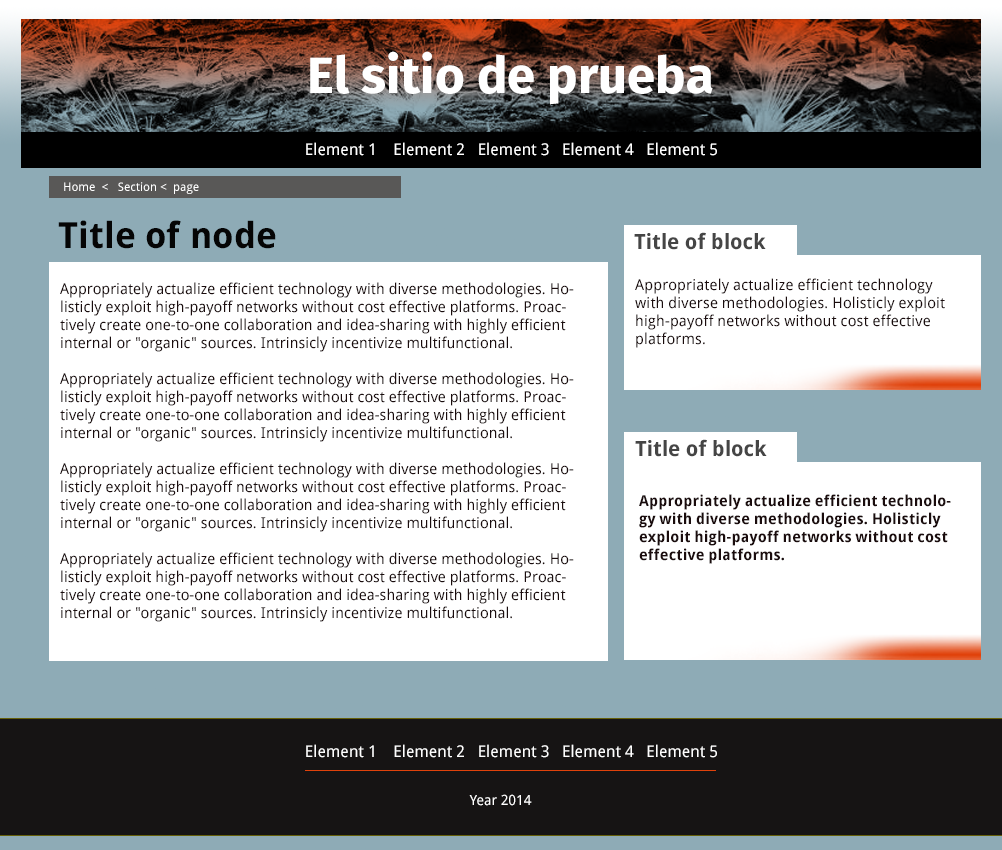
<style>
.page{position:relative;width:1002px;height:850px;background:#ffffff}
.page>*{position:absolute;margin:0}
.t1{font:51px "FiraSansOT-Bold";color:#ffffff}
.t2{font:16px "DroidSans";color:#ffffff}
.t3{font:12px "DroidSans";color:#ffffff}
.t4{font:36px "DroidSans-Bold";color:#050505}
.t5{font:21px "DroidSans-Bold";color:#454545}
.t6{font:15px "DroidSans";color:#1a0c0d}
.t7{font:15px "DroidSans-Bold";color:#1a0c0d}
.t8{font:14px "DroidSans";color:#ffffff}
</style>
<div class="page">
<p class="t1" style="left:310px;top:51px;width:403px;height:54px">El sitio de prueba</p>
<p class="t2" style="left:306px;top:142px;width:411px;height:14px">Element 1    Element 2   Element 3   Element 4   Element 5</p>
<p class="t3" style="left:64px;top:182px;width:135px;height:12px">Home  &lt;   Section &lt;  page</p>
<p class="t4" style="left:58px;top:220px;width:218px;height:29px">Title of node</p>
<p class="t5" style="left:634px;top:232px;width:132px;height:18px">Title of block</p>
<p class="t6" style="left:635px;top:278px;width:310px;height:70px">Appropriately actualize efficient technology with diverse methodologies. Holisticly exploit high-payoff networks without cost effective platforms.</p>
<p class="t6" style="left:60px;top:282px;width:514px;height:340px">Appropriately actualize efficient technology with diverse methodologies. Holisticly exploit high-payoff networks without cost effective platforms. Proactively create one-to-one collaboration and idea-sharing with highly efficient internal or "organic" sources. Intrinsicly incentivize multifunctional.<br><br>Appropriately actualize efficient technology with diverse methodologies. Holisticly exploit high-payoff networks without cost effective platforms. Proactively create one-to-one collaboration and idea-sharing with highly efficient internal or "organic" sources. Intrinsicly incentivize multifunctional.<br><br>Appropriately actualize efficient technology with diverse methodologies. Holisticly exploit high-payoff networks without cost effective platforms. Proactively create one-to-one collaboration and idea-sharing with highly efficient internal or "organic" sources. Intrinsicly incentivize multifunctional.<br><br>Appropriately actualize efficient technology with diverse methodologies. Holisticly exploit high-payoff networks without cost effective platforms. Proactively create one-to-one collaboration and idea-sharing with highly efficient internal or "organic" sources. Intrinsicly incentivize multifunctional.<br><br>Appropriately actualize efficient technology with diverse methodologies. Holisticly exploit high-payoff networks without cost effective platforms. Proactively create one-to-one collaboration and idea-sharing with highly efficient internal or "organic" sources. Intrinsicly incentivize multifunctional.<br>Appropriately actualize efficient technology with diverse methodologies. Holisticly exploit high-payoff networks without cost effective platforms. Proactively create one-to-one collaboration and idea-sharing with highly efficient internal or "organic" sources. Intrinsicly incentivize multifunctional.</p>
<p class="t5" style="left:635px;top:439px;width:132px;height:18px">Title of block</p>
<p class="t7" style="left:639px;top:494px;width:312px;height:70px">Appropriately actualize efficient technology with diverse methodologies. Holisticly exploit high-payoff networks without cost effective platforms.</p>
<p class="t2" style="left:306px;top:744px;width:411px;height:14px">Element 1    Element 2   Element 3   Element 4   Element 5</p>
<p class="t8" style="left:469px;top:794px;width:63px;height:12px">Year 2014</p>
</div>
